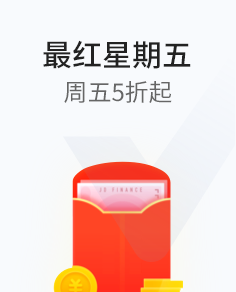
<style>
.page{position:relative;width:236px;height:292px;background:#f8fafd}
.page>*{position:absolute;margin:0}
.t1{font:30px "SourceHanSansCN-Medium";color:#222222}
.t2{font:24px "SourceHanSansCN-Regular";color:#666666}
</style>
<div class="page">
<p class="t1" style="left:43px;top:40px;width:148px;height:29px">最红星期五</p>
<p class="t2" style="left:64px;top:81px;width:108px;height:22px">周五5折起</p>
</div>
